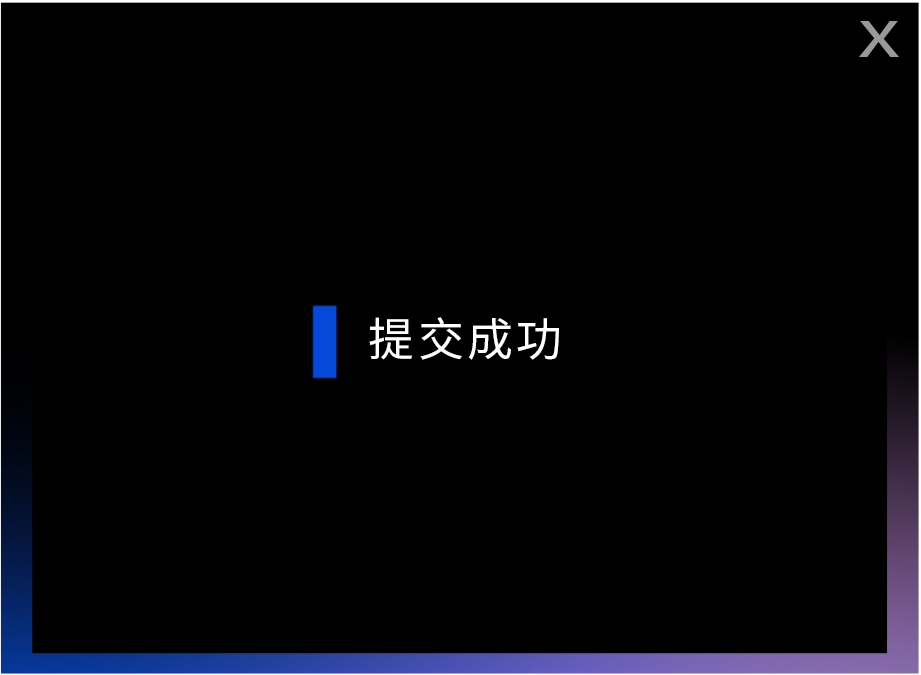
<style>
.page{position:relative;width:921px;height:675px;background:#000000}
.page>*{position:absolute;margin:0}
.t1{font:45.8px "NotoSansCJKsc-Regular";letter-spacing:0.075em;color:#ffffff}
</style>
<div class="page">
<p class="t1" style="left:369px;top:317px;width:190px;height:43px">提交成功</p>
</div>
